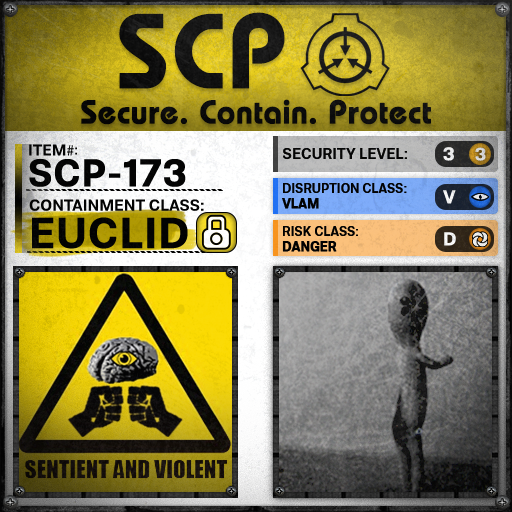
<style>
.page{position:relative;width:512px;height:512px}
.page>*{position:absolute;margin:0}
.t1{font:105.8px "BauhausLT-Demi";color:#000000;font-weight:bold}
.t2{font:33px "BauhausLT-Demi";color:#000000;font-weight:bold}
.t3{font:15.7px "Molde-Semibold";color:#000000}
.t4{font:15.7px "MyriadPro-Regular";color:#000000}
.t5{font:13.7px "Molde-Semibold";color:#000000}
.t6{font:15px "Molde-Semibold";color:#000000}
.t7{font:18.6px "Molde-Semibold";color:#ffffff;font-weight:bold}
.t8{font:17.8px "Molde-Semibold";color:#d6d7d7;font-weight:bold}
.t9{font:38.2px "Molde-Semibold";color:#000000;font-weight:bold}
.t10{font:12.8px "Molde-Semibold";color:#000000}
.t11{font:12.8px "Molde-Semibold";color:#000000;font-weight:bold}
.t12{font:15.9px "Molde-Semibold";color:#000000}
.t13{font:42.8px "Molde-Semibold";color:#000000;font-weight:bold}
</style>
<div class="page">
<p class="t1" style="left:119px;top:12px;width:166px;height:77px">SCP</p>
<p class="t2" style="left:81px;top:99px;width:350px;height:26px">Secure. Contain. Protect</p>
<p class="t3" style="left:29px;top:144px;width:45px;height:12px">ITEM<span class="t4">#</span></p>
<p class="t5" style="left:75px;top:147px;width:2px;height:8px">:</p>
<p class="t6" style="left:283px;top:148px;width:124px;height:11px">SECURITY LEVEL:</p>
<p class="t7" style="left:443px;top:147px;width:11px;height:14px">3</p>
<p class="t8" style="left:475px;top:147px;width:11px;height:14px">3</p>
<p class="t9" style="left:29px;top:159px;width:157px;height:28px">SCP-173</p>
<p class="t10" style="left:282px;top:183px;width:125px;height:26px">DISRUPTION CLASS:<br><span class="t11">VLAM</span></p>
<p class="t7" style="left:443px;top:190px;width:13px;height:14px">V</p>
<p class="t12" style="left:29px;top:199px;width:175px;height:12px">CONTAINMENT CLASS:</p>
<p class="t13" style="left:32px;top:217px;width:156px;height:32px">EUCLID</p>
<p class="t10" style="left:282px;top:226px;width:76px;height:26px">RISK CLASS:<br><span class="t11">DANGER</span></p>
<p class="t7" style="left:444px;top:232px;width:12px;height:14px">D</p>
</div>
